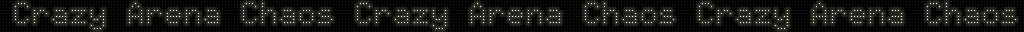
<style>
.page{position:relative;width:1024px;height:32px;background:#000000}
.page>*{position:absolute;margin:0}
.t1{font:31px "Doto-Black";color:#ffffff}
</style>
<div class="page">
<p class="t1" style="left:15px;top:3px;width:1001px;height:26px">Crazy Arena Chaos Crazy Arena Chaos Crazy Arena Chaos</p>
</div>
